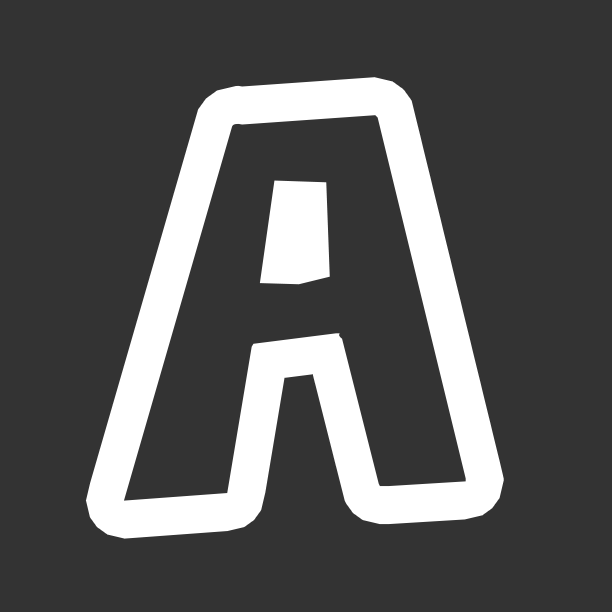
<style>
.page{position:relative;width:612px;height:612px;background:#333333}
.page>*{position:absolute;margin:0}
.t1{font:583px "DKSnippitySnap";letter-spacing:0.04em;color:#333333}
</style>
<div class="page">
<p class="t1" style="left:123px;top:115px;width:343px;height:386px">A</p>
</div>
